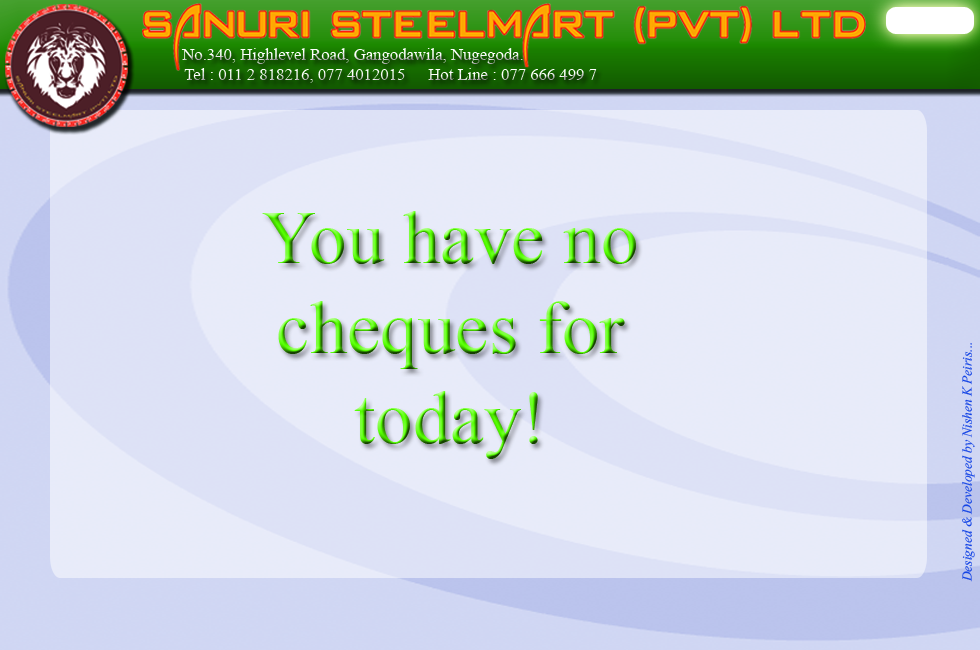
<style>
.page{position:relative;width:980px;height:650px;background:#e8ebf9}
.page>*{position:absolute;margin:0}
.t1{font:16.6px "TimesNewRomanPSMT"}
.t2{font:75px "TimesNewRomanPSMT"}
.t3{font:16.7px "Vijaya";color:#1546e5}
</style>
<div class="page">
<p class="t1" style="left:181px;top:48px;width:342px;height:16px">No.340, Highlevel Road, Gangodawila, Nugegoda.</p>
<p class="t1" style="left:184px;top:68px;width:221px;height:15px">Tel : 011 2 818216, 077 4012015</p>
<p class="t1" style="left:428px;top:68px;width:169px;height:12px">Hot Line : 077 666 499 7</p>
<p class="t2" style="left:262px;top:211px;width:374px;height:248px;text-align:center">You have no<br>cheques for<br>today!</p>
<p class="t3" style="left:962px;top:343px;width:13px;height:239px;rotate:-90deg">Designed &amp; Developed by Nishen K Peiris...</p>
</div>
